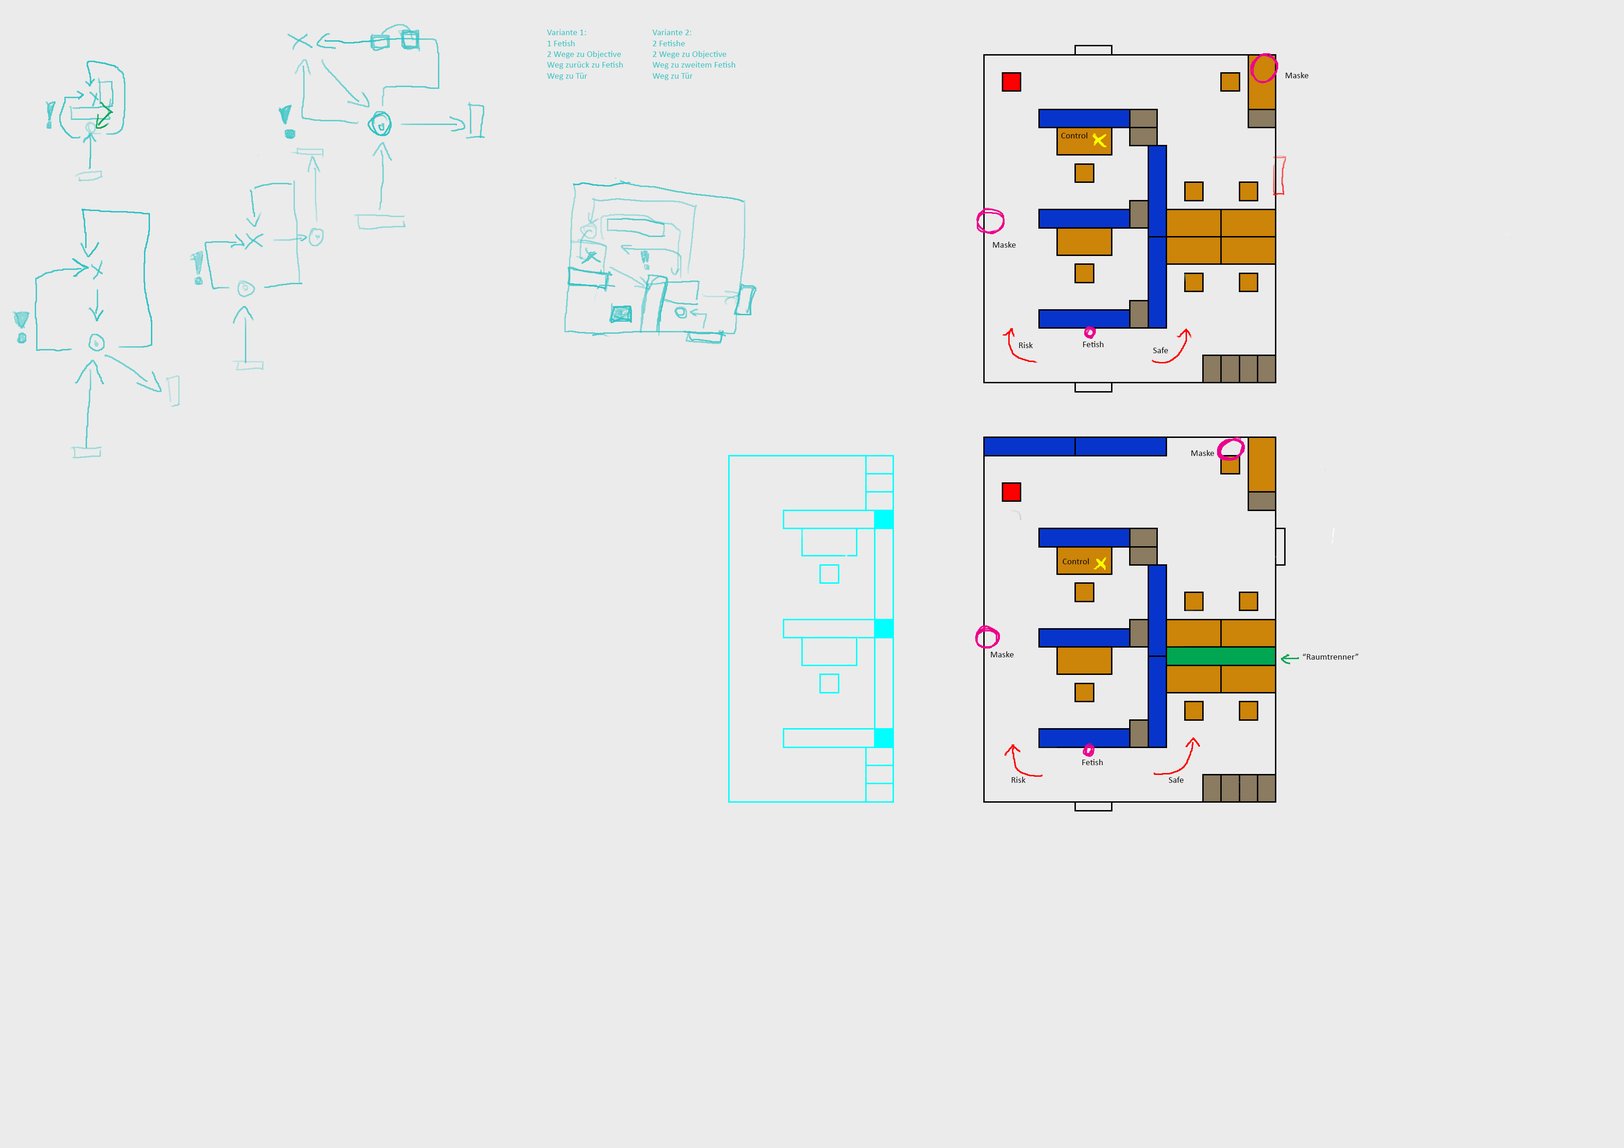
<style>
.page{position:relative;width:1624px;height:1148px;background:#ebebeb}
.page>*{position:absolute;margin:0}
.t1{font:9px "Calibri";color:#32c2c3}
.t2{font:9px "Calibri";color:#000000}
</style>
<div class="page">
<p class="t1" style="left:547px;top:29px;width:76px;height:51px">Variante 1:<br>1 Fetish<br>2 Wege zu Objective<br>Weg zurück zu Fetish<br>Weg zu Tür</p>
<p class="t1" style="left:652px;top:29px;width:83px;height:51px">Variante 2:<br>2 Fetishe<br>2 Wege zu Objective<br>Weg zu zweitem Fetish<br>Weg zu Tür</p>
<p class="t2" style="left:1285px;top:72px;width:23px;height:6px">Maske</p>
<p class="t2" style="left:1061px;top:132px;width:26px;height:6px">Control</p>
<p class="t2" style="left:993px;top:242px;width:23px;height:6px">Maske</p>
<p class="t2" style="left:1083px;top:341px;width:20px;height:6px">Fetish</p>
<p class="t2" style="left:1019px;top:342px;width:14px;height:6px">Risk</p>
<p class="t2" style="left:1153px;top:347px;width:15px;height:6px">Safe</p>
<p class="t2" style="left:1191px;top:450px;width:23px;height:6px">Maske</p>
<p class="t2" style="left:1062px;top:558px;width:27px;height:6px">Control</p>
<p class="t2" style="left:991px;top:651px;width:23px;height:6px">Maske</p>
<p class="t2" style="left:1302px;top:654px;width:56px;height:6px">“Raumtrenner”</p>
<p class="t2" style="left:1082px;top:759px;width:21px;height:6px">Fetish</p>
<p class="t2" style="left:1011px;top:777px;width:14px;height:6px">Risk</p>
<p class="t2" style="left:1168px;top:777px;width:16px;height:6px">Safe</p>
</div>
